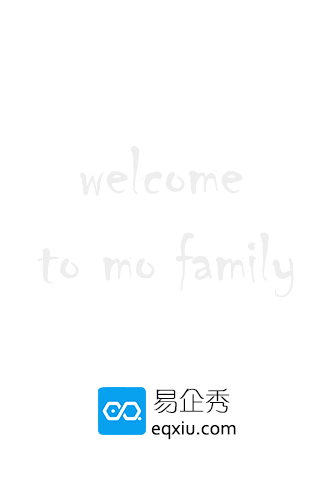
<style>
.page{position:relative;width:320px;height:480px;background:#ffffff}
.page>*{position:absolute;margin:0}
.t1{font:72px "Chiller-Regular";color:#eeeeee}
.t2{font:26px "GJJXQJW--GB1-0";color:#000000}
.t3{font:20px "Corbel";color:#000000}
</style>
<div class="page">
<p class="t1" style="left:38px;top:146px;width:256px;height:152px">welcome <br>to mo family</p>
<p class="t2" style="left:153px;top:388px;width:77px;height:25px">易企秀</p>
<p class="t3" style="left:151px;top:421px;width:85px;height:19px">eqxiu.com</p>
</div>
